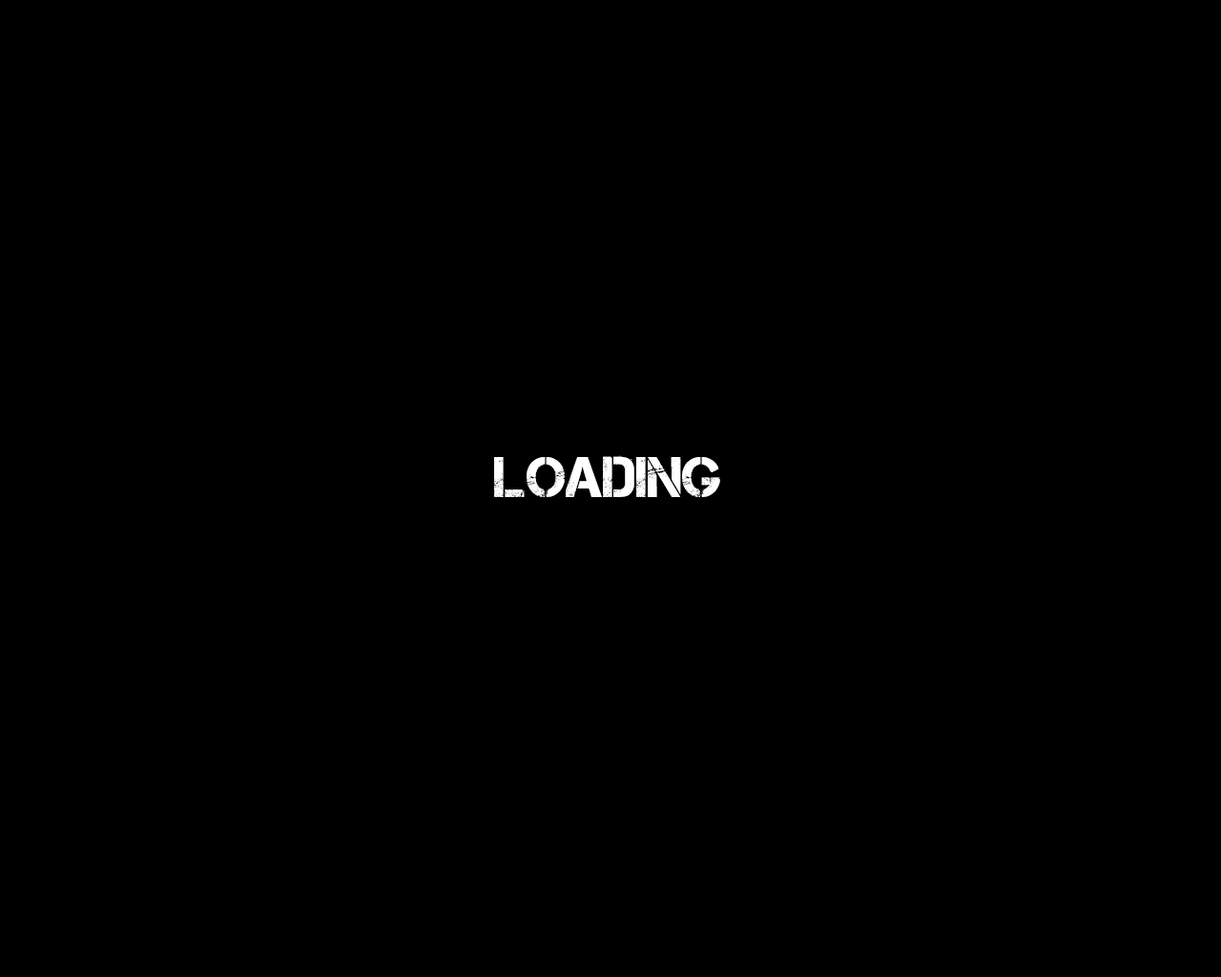
<style>
.page{position:relative;width:1221px;height:977px;background:#000000}
.page>*{position:absolute;margin:0}
.t1{font:57.2px "Captureit";color:#ffffff}
</style>
<div class="page">
<p class="t1" style="left:494px;top:455px;width:226px;height:42px">Loading</p>
</div>
